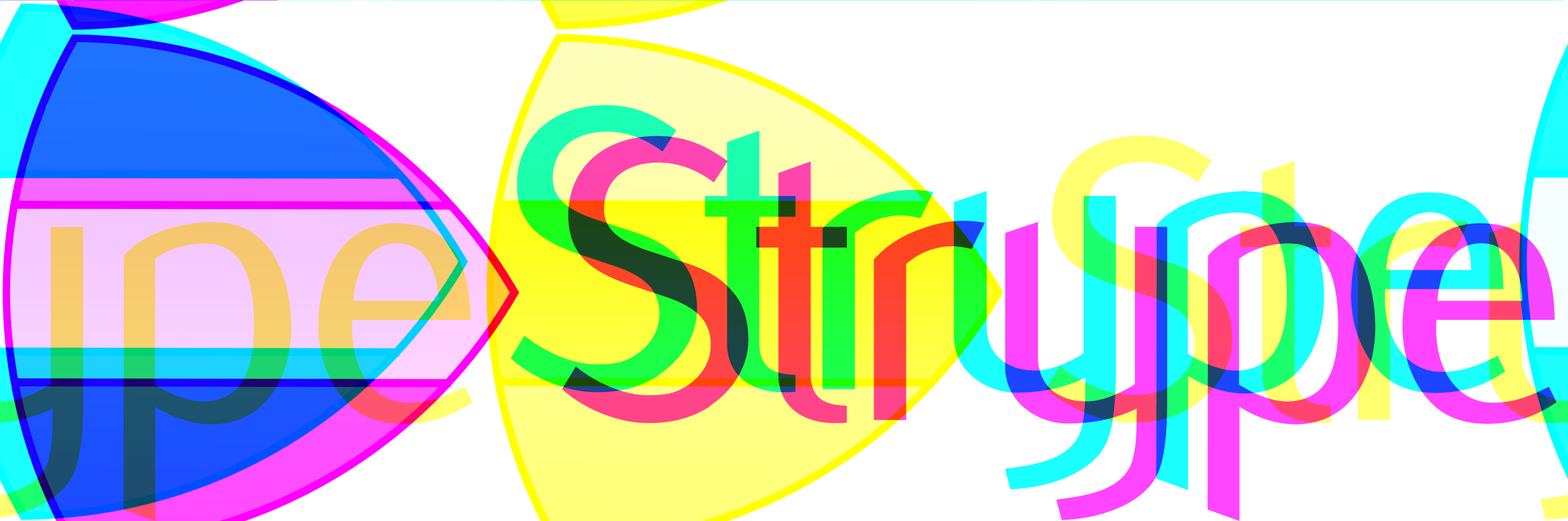
<style>
.page{position:relative;width:1568px;height:521px;background:#ffffff}
.page>*{position:absolute;margin:0}
.t1{font:441px "Flux";letter-spacing:-0.015em}
</style>
<div class="page">
<p class="t1" style="left:562px;top:105px;width:995px;height:385px">Strype</p>
</div>
